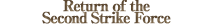
<style>
.page{position:relative;width:212px;height:26px;background:#ffffff}
.page>*{position:absolute;margin:0}
.t1{font:15px/12px "RyuminPro-ExBold";letter-spacing:-0.08em;color:#6b573e;font-weight:bold}
</style>
<div class="page">
<p class="t1" style="left:42px;top:0px;width:129px;height:24px;text-align:center">Return of the<br>Second Strike Force</p>
</div>
